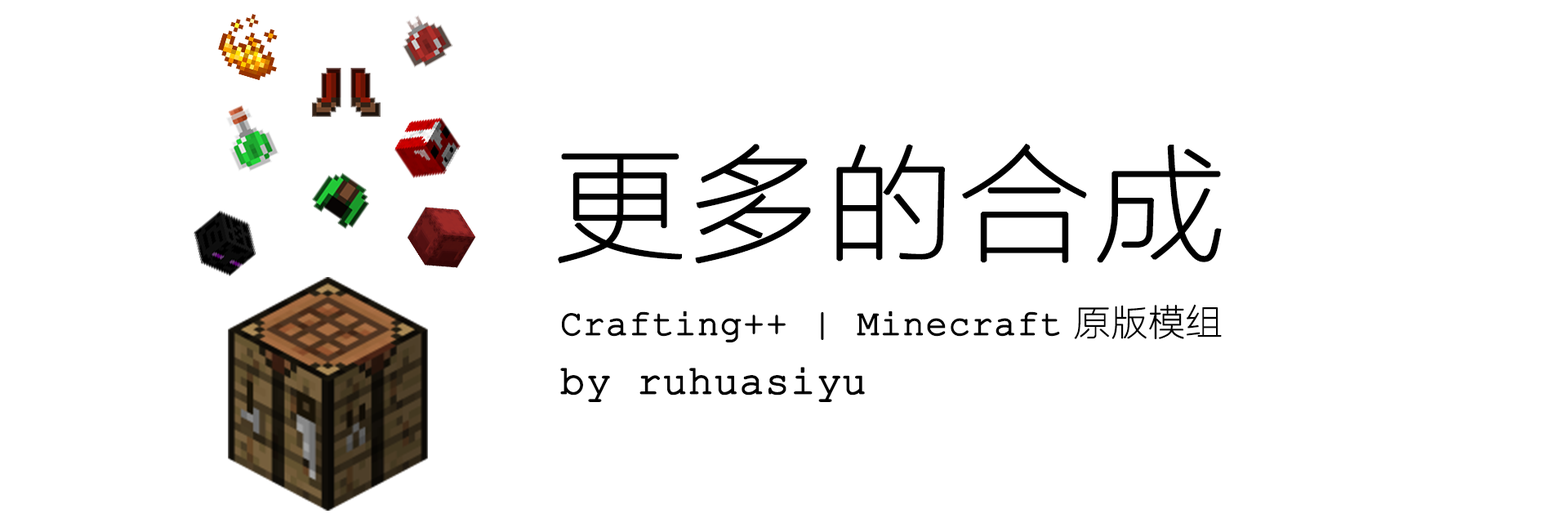
<style>
.page{position:relative;width:1568px;height:523px;background:#ffffff}
.page>*{position:absolute;margin:0}
.t1{font:127.2px "FZLTCXHJW--GB1-0";color:#000000;font-weight:bold;scale:1.03 1}
.t2{font:36.4px "CourierNewPSMT";color:#000000;font-weight:bold}
.t3{font:36.4px "FZLTCXHJW--GB1-0";color:#000000;font-weight:bold}
.t4{font:40.8px "CourierNewPSMT";color:#000000;font-weight:bold}
</style>
<div class="page">
<p class="t1" style="left:558px;top:143px;width:664px;height:121px">更多的合成</p>
<p class="t2" style="left:562px;top:304px;width:660px;height:38px">Crafting++ | Minecraft<span class="t3"> 原版模组</span></p>
<p class="t4" style="left:560px;top:367px;width:305px;height:35px">by ruhuasiyu</p>
</div>
